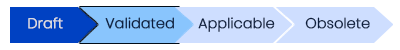
<style>
.page{position:relative;width:400px;height:50px;background:#ffffff}
.page>*{position:absolute;margin:0}
.t1{font:14px "Poppins-ExtraLight";color:#e1e1e1;font-weight:bold}
.t2{font:14px "Poppins-ExtraLight";color:#0a1c3c;font-weight:bold}
</style>
<div class="page">
<p class="t1" style="left:28px;top:17px;width:35px;height:12px">Draft</p>
<p class="t2" style="left:105px;top:17px;width:69px;height:12px">Validated</p>
<p class="t2" style="left:198px;top:17px;width:77px;height:15px">Applicable</p>
<p class="t2" style="left:305px;top:17px;width:65px;height:12px">Obsolete</p>
</div>
